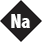
<style>
.page{position:relative;width:42px;height:42px;background:#ffffff}
.page>*{position:absolute;margin:0}
.t1{font:20px "AbadiMT-CondensedExtraBold";color:#ffffff}
</style>
<div class="page">
<p class="t1" style="left:11px;top:14px;width:19px;height:14px">Na</p>
</div>
